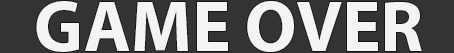
<style>
.page{position:relative;width:454px;height:53px;background:#333333}
.page>*{position:absolute;margin:0}
.t1{font:72px "MyriadHebrew-Bold";color:#f4f4f4}
</style>
<div class="page">
<p class="t1" style="left:36px;top:1px;width:386px;height:51px">GAME OVER</p>
</div>
